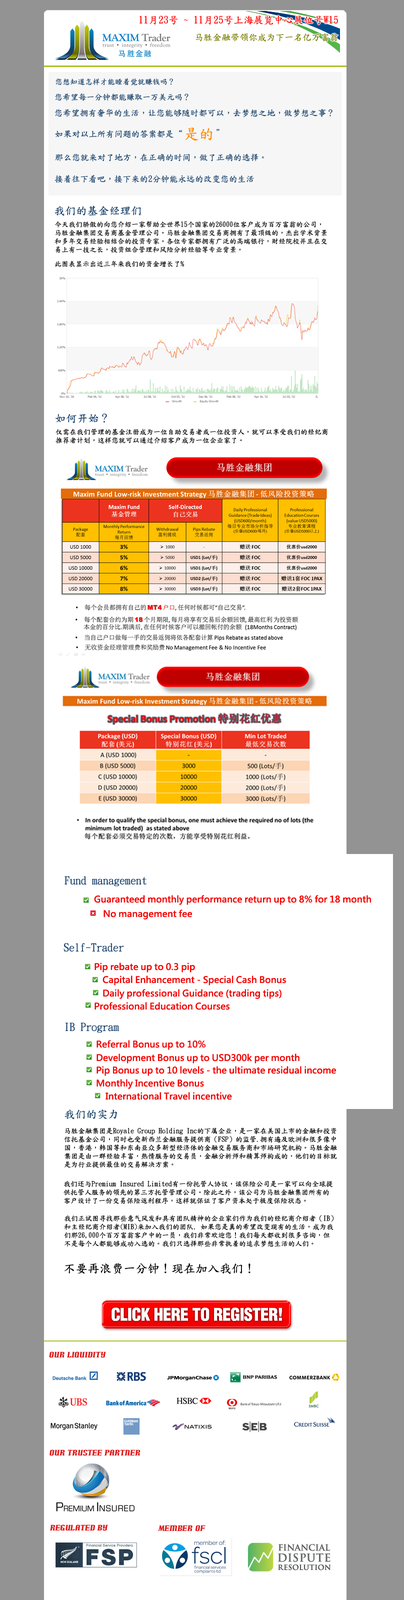
<style>
.page{position:relative;width:404px;height:1600px;background:#ffffff}
.page>*{position:absolute;margin:0}
.t1{font:10px "DFKaiShu-SB-Estd-BF";color:#ff0000}
.t2{font:9px "DFKaiShu-SB-Estd-BF";color:#777c00}
.t3{font:7.5px "DFKaiShu-SB-Estd-BF";color:#163f68}
.t4{font:8px "DFKaiShu-SB-Estd-BF";color:#163f68}
.t5{font:8.5px "DFKaiShu-SB-Estd-BF";color:#163f68}
.t6{font:15px "DFKaiShu-SB-Estd-BF";color:#ff8a00}
.t7{font:11px "DFKaiShu-SB-Estd-BF";color:#163f68}
.t8{font:7px "DFKaiShu-SB-Estd-BF";color:#040404}
.t9{font:7px "DFKaiShu-SB-Estd-BF";color:#010101}
.t10{font:7px "DFKaiShu-SB-Estd-BF";color:#000000}
.t11{font:9px "MicrosoftJhengHeiBold";color:#f40000}
.t12{font:12px "DFKaiShu-SB-Estd-BF";color:#000000}
.t13{font:7px "Arnprior";color:#dc1e1f}
</style>
<div class="page">
<p class="t1" style="left:140px;top:16px;width:198px;height:8px">11月23号 ~ 11月25号上海展览中心展位号W15</p>
<p class="t2" style="left:196px;top:33px;width:142px;height:9px">马胜金融带领你成为下一名亿万富翁</p>
<p class="t3" style="left:56px;top:78px;width:117px;height:8px">您想知道怎样才能睡着觉就赚钱吗？</p>
<p class="t4" style="left:55px;top:93px;width:133px;height:8px">您希望每一分钟都能赚取一万美元吗？</p>
<p class="t5" style="left:54px;top:109px;width:278px;height:9px">您希望拥有奢华的生活，让您能够随时都可以，去梦想之地，做梦想之事？</p>
<p class="t5" style="left:55px;top:130px;width:127px;height:8px">如果对以上所有问题的答案都是“</p>
<p class="t6" style="left:185px;top:128px;width:27px;height:12px">是的</p>
<p class="t5" style="left:216px;top:129px;width:4px;height:3px">”</p>
<p class="t5" style="left:55px;top:154px;width:209px;height:8px">那么您就来对了地方，在正确的时间，做了正确的选择。</p>
<p class="t5" style="left:54px;top:175px;width:200px;height:8px">接着往下看吧，接下来的2分钟能永远的改变您的生活</p>
<p class="t7" style="left:54px;top:206px;width:87px;height:10px">我们的基金经理们</p>
<p class="t8" style="left:54px;top:221px;width:273px;height:32px">今天我们骄傲的向您介绍一家帮助全世界15个国家的26000位客户成为百万富翁的公司，<br>马胜金融集团交易商基金管理公司。马胜金融集团交易商拥有了最顶级的，杰出学术背景<br>和多年交易经验相结合的投资专家。各位专家都拥有广泛的高端银行，财经院校并且在交<br>易上有一技之长，投资组合管理和风险分析经验等专业背景。</p>
<p class="t9" style="left:55px;top:260px;width:129px;height:8px">此图表显示出近三年来我们的资金增长了%</p>
<p class="t7" style="left:56px;top:414px;width:51px;height:10px">如何开始？</p>
<p class="t10" style="left:56px;top:428px;width:272px;height:16px">仅需在我们管理的基金注册成为一位自助交易者或一位投资人，就可以享受我们的经纪商<br>推荐者计划，这样您就可以通过介绍客户成为一位企业家了。</p>
<p class="t7" style="left:64px;top:876px;width:82px;height:10px">Fund management</p>
<p class="t11" style="left:94px;top:895px;width:277px;height:10px">Guaranteed monthly performance return up to 8% for 18 month</p>
<p class="t11" style="left:104px;top:910px;width:88px;height:10px">No management fee</p>
<p class="t7" style="left:64px;top:943px;width:60px;height:9px">Self-Trader</p>
<p class="t11" style="left:94px;top:962px;width:101px;height:10px">Pip rebate up to 0.3 pip</p>
<p class="t11" style="left:102px;top:976px;width:184px;height:10px">Capital Enhancement - Special Cash Bonus</p>
<p class="t11" style="left:103px;top:989px;width:179px;height:10px">Daily professional Guidance (trading tips)</p>
<p class="t11" style="left:94px;top:1002px;width:136px;height:8px">Professional Education Courses</p>
<p class="t7" style="left:65px;top:1022px;width:54px;height:11px">IB Program</p>
<p class="t11" style="left:96px;top:1040px;width:110px;height:10px">Referral Bonus up to 10%</p>
<p class="t11" style="left:96px;top:1054px;width:204px;height:10px">Development Bonus up to USD300k per month</p>
<p class="t11" style="left:96px;top:1066px;width:240px;height:10px">Pip Bonus up to 10 levels - the ultimate residual income</p>
<p class="t11" style="left:96px;top:1079px;width:108px;height:10px">Monthly Incentive Bonus</p>
<p class="t11" style="left:106px;top:1092px;width:126px;height:8px">International Travel incentive</p>
<p class="t7" style="left:64px;top:1110px;width:53px;height:10px">我们的实力</p>
<p class="t10" style="left:64px;top:1128px;width:273px;height:40px">马胜金融集团是Royale Group Holding Inc的下属企业，是一家在美国上市的金融和投资<br>信托基金公司，同时也受新西兰金融服务提供商（FSP）的监管.拥有遍及欧洲和很多像中<br>国，香港，韩国等和东南亚众多新型经济体的金融交易服务商和市场研究机构。马胜金融<br>集团是由一群经验丰富，热情服务的交易员，金融分析师和精算师构成的，他们的目标就<br>是为行业提供最佳的交易解决方案。</p>
<p class="t10" style="left:64px;top:1180px;width:269px;height:24px">我们还与Premium Insured Limited有一份托管人协议，该保险公司是一家可以向全球提<br>供托管人服务的领先的第三方托管管理公司。除此之外，该公司为马胜金融集团所有的<br>客户设计了一份交易保险返利程序，这样就保证了客户资本处于极度保险状态。</p>
<p class="t10" style="left:64px;top:1215px;width:270px;height:32px">我们正试图寻找那些意气风发和具有团队精神的企业家们作为我们的经纪商介绍者（IB）<br>和主经纪商介绍者(MIB)来加入我们的团队. 如果您是真的希望改变现有的生活，成为我<br>们那26,000个百万富翁客户中的一员，我们非常欢迎您！我们每天都收到很多咨询，但<br>不是每个人都能够成功入选的。我们只选择那些非常执着的追求梦想生活的人们。</p>
<p class="t12" style="left:64px;top:1263px;width:186px;height:11px">不要再浪费一分钟！现在加入我们！</p>
<p class="t13" style="left:49px;top:1352px;width:57px;height:6px">Our Liquidity</p>
<p class="t13" style="left:50px;top:1450px;width:90px;height:6px">Our Trustee Partner</p>
<p class="t13" style="left:50px;top:1524px;width:58px;height:7px">Regulated by</p>
<p class="t13" style="left:158px;top:1525px;width:48px;height:7px">Member Of</p>
</div>
